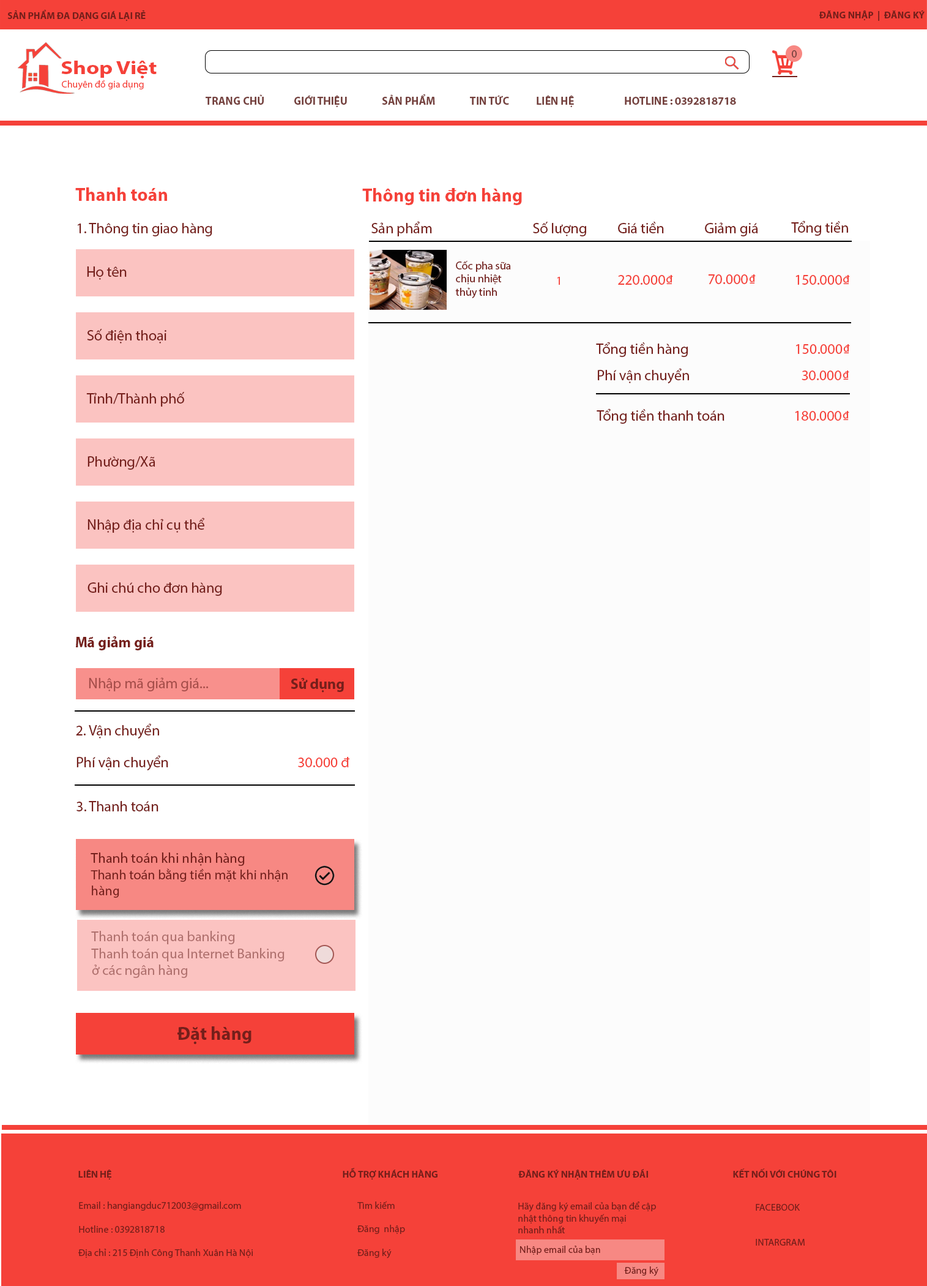
<style>
.page{position:relative;width:927px;height:1286px;background:#fcfcfc}
.page>*{position:absolute;margin:0}
.t1{font:9.8px "MyriadPro-Bold";color:#751f1b}
.t2{font:11px "MyriadPro-Regular";color:#75413e}
.t3{font:19.1px "MyriadPro-Bold";color:#f54139;scale:1.19 1}
.t4{font:9.8px "MyriadPro-Regular";color:#f54139}
.t5{font:9.8px "MyriadPro-Regular";color:#ffffff}
.t6{font:11px "MyriadPro-Bold";color:#75413e}
.t7{font:18.4px "MyriadPro-Bold";color:#f54139}
.t8{font:14.7px "MyriadPro-Regular";color:#751f1b}
.t9{font:11px "MyriadPro-Regular";color:#751f1b}
.t10{font:12.2px "MyriadPro-Regular";color:#f54139}
.t11{font:14.7px "MyriadPro-Regular";color:#f54139}
.t12{font:14.7px "MyriadPro-Bold";color:#751f1b}
.t13{font:14.7px "MyriadPro-Regular";color:#a64e4a}
.t14{font:13.5px "MyriadPro-Regular";color:#751f1b}
.t15{font:14.1px "MyriadPro-Regular";color:#751f1b}
.t16{font:14.1px "MyriadPro-Regular";color:#b0716e}
.t17{font:18.4px "MyriadPro-Bold";color:#751f1b}
.t18{font:9.8px "MyriadPro-Bold";color:#751f1b;text-transform:uppercase}
.t19{font:9.8px "MyriadPro-Regular";color:#751f1b}
</style>
<div class="page">
<p class="t1" style="left:7px;top:10px;width:139px;height:11px">SẢN PHẨM ĐA DẠNG GIÁ LẠI RẺ</p>
<p class="t1" style="left:820px;top:10px;width:105px;height:11px">ĐĂNG NHẬP  |  ĐĂNG KÝ</p>
<p class="t2" style="left:792px;top:50px;width:5px;height:8px">0</p>
<p class="t3" style="left:61px;top:61px;width:96px;height:17px">Shop Việt</p>
<p class="t4" style="left:58px;top:80px;width:86px;height:10px"><span class="t5">s</span>Chuyên đồ gia dụng</p>
<p class="t6" style="left:206px;top:94px;width:530px;height:13px">TRANG CHỦ   GIỚI THIỆU  SẢN PHẨM   TIN TỨC  LIÊN HỆ   HOTLINE : 0392818718</p>
<p class="t7" style="left:75px;top:187px;width:92px;height:14px">Thanh toán</p>
<p class="t7" style="left:362px;top:188px;width:160px;height:17px">Thông tin đơn hàng</p>
<p class="t8" style="left:372px;top:221px;width:60px;height:15px">Sản phẩm</p>
<p class="t8" style="left:533px;top:222px;width:53px;height:14px">Số lượng</p>
<p class="t8" style="left:618px;top:222px;width:46px;height:11px">Giá tiền</p>
<p class="t8" style="left:792px;top:220px;width:57px;height:16px">Tổng tiền</p>
<p class="t8" style="left:78px;top:223px;width:134px;height:13px">1. Thông tin giao hàng</p>
<p class="t8" style="left:705px;top:222px;width:54px;height:14px">Giảm giá</p>
<p class="t8" style="left:87px;top:266px;width:40px;height:14px">Họ tên</p>
<p class="t9" style="left:455px;top:261px;width:56px;height:37px">Cốc pha sữa <br>chịu nhiệt <br>thủy tinh</p>
<p class="t10" style="left:557px;top:277px;width:3px;height:8px">1</p>
<p class="t11" style="left:618px;top:275px;width:55px;height:10px">220.000₫</p>
<p class="t11" style="left:708px;top:274px;width:48px;height:10px">70.000₫</p>
<p class="t11" style="left:796px;top:275px;width:54px;height:10px">150.000₫</p>
<p class="t8" style="left:87px;top:329px;width:80px;height:14px">Số điện thoại</p>
<p class="t8" style="left:596px;top:342px;width:92px;height:15px">Tổng tiền hàng</p>
<p class="t11" style="left:796px;top:344px;width:54px;height:10px">150.000₫</p>
<p class="t8" style="left:598px;top:368px;width:91px;height:15px">Phí vận chuyển</p>
<p class="t11" style="left:802px;top:370px;width:48px;height:10px">30.000₫</p>
<p class="t8" style="left:86px;top:392px;width:98px;height:15px">Tỉnh/Thành phố</p>
<p class="t8" style="left:597px;top:408px;width:128px;height:16px">Tổng tiền thanh toán</p>
<p class="t8" style="left:88px;top:456px;width:68px;height:14px">Phường/Xã</p>
<p class="t8" style="left:88px;top:517px;width:116px;height:16px">Nhập địa chỉ cụ thể</p>
<p class="t8" style="left:88px;top:582px;width:134px;height:14px">Ghi chú cho đơn hàng</p>
<p class="t12" style="left:76px;top:636px;width:78px;height:14px">Mã giảm giá</p>
<p class="t13" style="left:89px;top:677px;width:120px;height:14px">Nhập mã giảm giá...</p>
<p class="t12" style="left:291px;top:678px;width:53px;height:14px">Sử dụng</p>
<p class="t8" style="left:76px;top:723px;width:83px;height:15px">2. Vận chuyển</p>
<p class="t8" style="left:77px;top:755px;width:91px;height:15px">Phí vận chuyển</p>
<p class="t11" style="left:298px;top:757px;width:52px;height:10px">30.000 đ</p>
<p class="t8" style="left:77px;top:801px;width:82px;height:10px">3. Thanh toán</p>
<p class="t14" style="left:91px;top:852px;width:197px;height:46px"><span class="t15">Thanh toán khi nhận hàng<br></span>Thanh toán bằng tiền mặt khi nhận <br>hàng</p>
<p class="t16" style="left:91px;top:931px;width:194px;height:47px">Thanh toán qua banking<br>Thanh toán qua Internet Banking<br>ở các ngân hàng</p>
<p class="t17" style="left:178px;top:1026px;width:74px;height:18px">Đặt hàng</p>
<p class="t18" style="left:78px;top:1167px;width:759px;height:13px"><span class="t1">LIÊN HỆ             HỖ TRỢ KHÁCH HÀNG     </span>Đăng ký nhận thêm ưu đãi             Kết nối với chúng tôi</p>
<p class="t19" style="left:78px;top:1201px;width:175px;height:56px">Email : hangiangduc712003@gmail.com<br><br>Hotline : 0392818718<br><br>Địa chỉ : 215 Định Công Thanh Xuân Hà Nội</p>
<p class="t19" style="left:358px;top:1201px;width:47px;height:57px">Tìm kiếm<br><br>Đăng  nhập<br><br>Đăng ký</p>
<p class="t19" style="left:519px;top:1201px;width:137px;height:32px">Hãy đăng ký email của bạn để cập <br>nhật thông tin khuyến mại<br>nhanh nhất</p>
<p class="t19" style="left:756px;top:1204px;width:49px;height:41px">FACEBOOK<br><br><br>INTARGRAM</p>
<p class="t19" style="left:520px;top:1245px;width:81px;height:9px">Nhập email của bạn</p>
<p class="t19" style="left:624px;top:1266px;width:35px;height:10px">Đăng ký</p>
</div>
